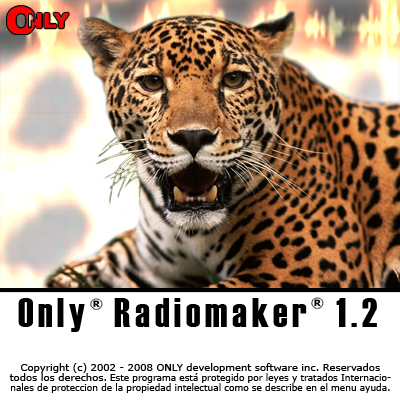
<style>
.page{position:relative;width:400px;height:400px;background:#ffffff}
.page>*{position:absolute;margin:0}
.t1{font:40.7px "Haettenschweiler";letter-spacing:0.12em;color:#000000}
.t2{font:9px/10px "Verdana";color:#000000}
.t3{font:10px/10px "Verdana";color:#000000}
</style>
<div class="page">
<p class="t1" style="left:18px;top:298px;width:359px;height:34px">Only  Radiomaker  1.2</p>
<p class="t2" style="left:9px;top:363px;width:382px;height:30px;text-align:center"><span class="t3">Copyright (c) 2002 - 2008 ONLY development software inc. Reservados<br>todos los derechos. </span>Este programa está protegido por leyes y tratados Internacio-<br>nales de proteccion de la propiedad intelectual como se describe en el menu ayuda.</p>
</div>
